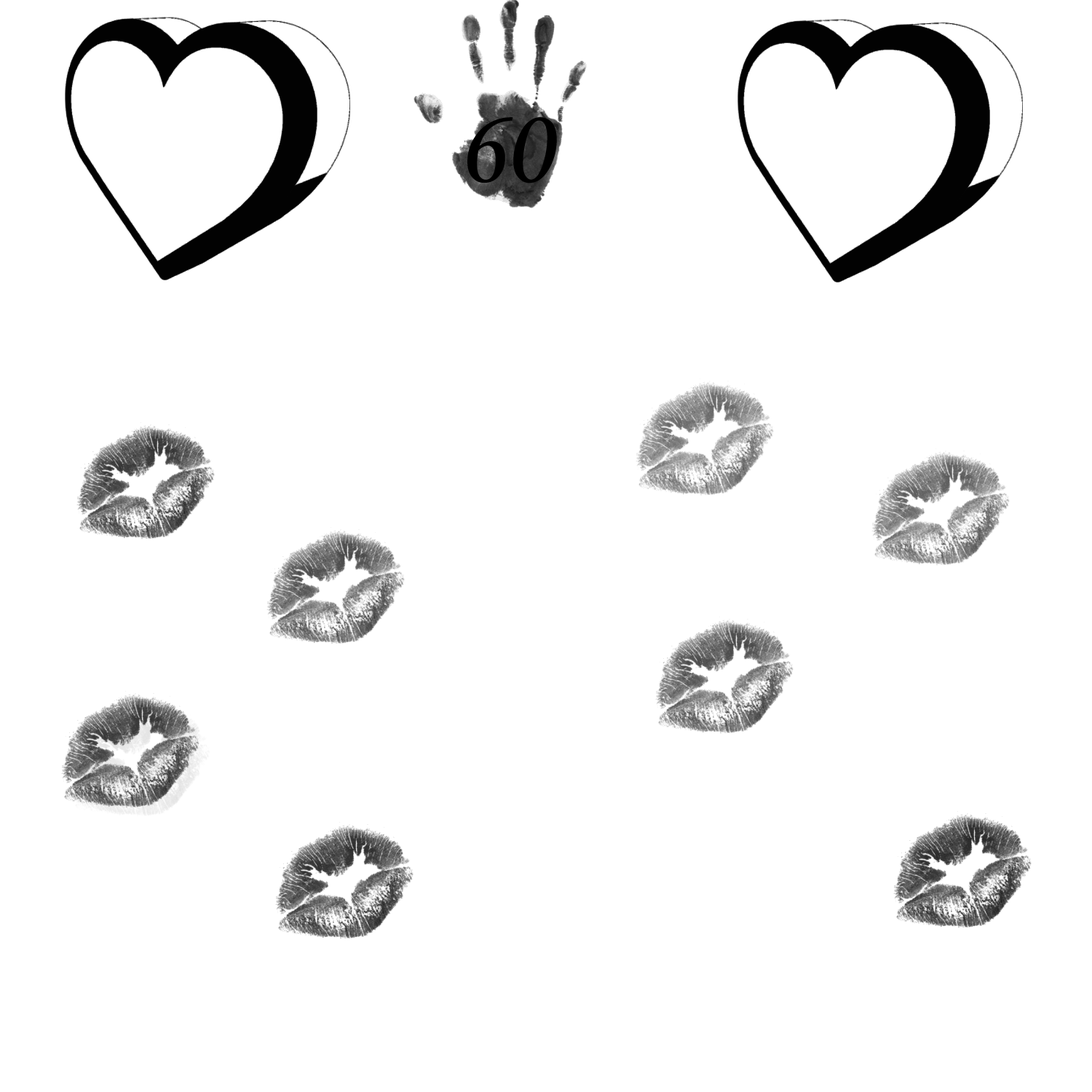
<style>
.page{position:relative;width:1092px;height:1092px;background:#ffffff}
.page>*{position:absolute;margin:0}
.t1{font:109.2px "MonotypeCorsiva";color:#000000}
</style>
<div class="page">
<p class="t1" style="left:467px;top:117px;width:90px;height:66px">60</p>
</div>
